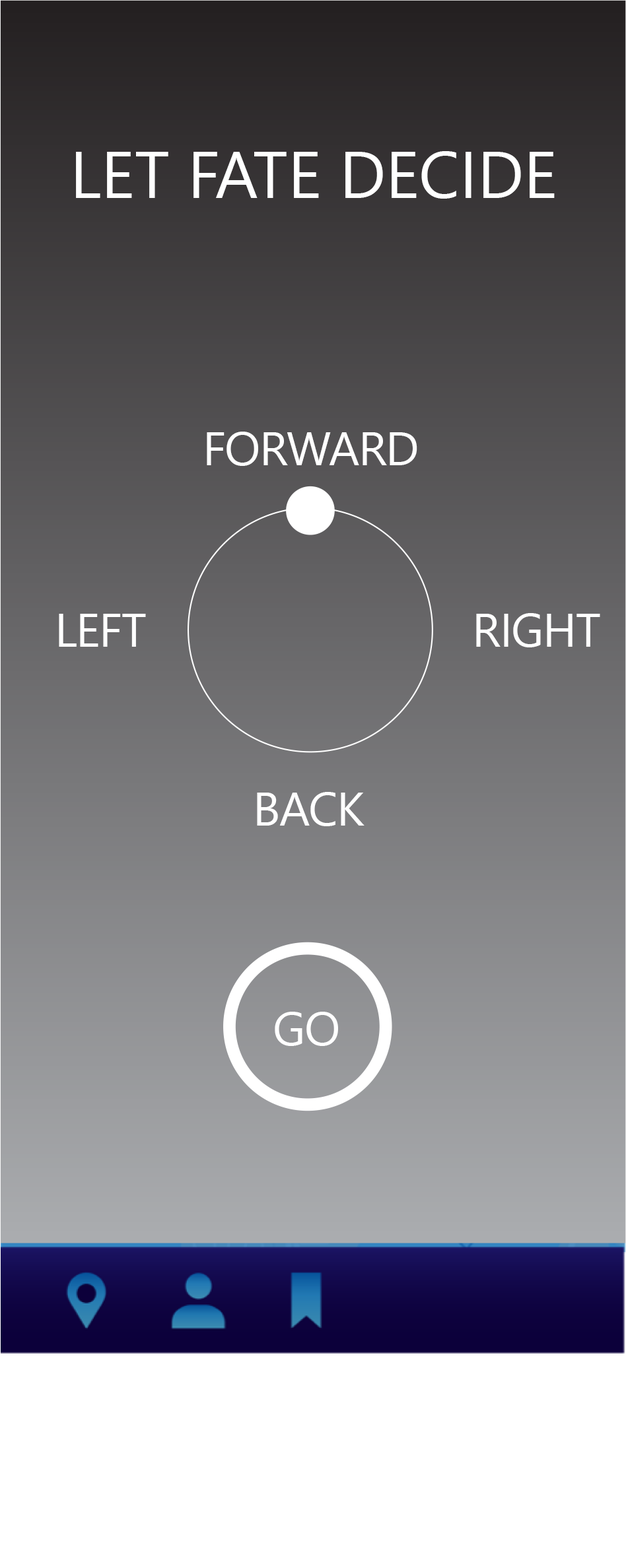
<style>
.page{position:relative;width:626px;height:1568px}
.page>*{position:absolute;margin:0}
.t1{font:66px "SegoeUIHistoric";color:#ffffff}
.t2{font:47.8px "SegoeUIHistoric";letter-spacing:-0.025em;color:#ffffff}
</style>
<div class="page">
<p class="t1" style="left:76px;top:151px;width:478px;height:48px">LET FATE DECIDE</p>
<p class="t2" style="left:207px;top:432px;width:210px;height:34px">FORWARD</p>
<p class="t2" style="left:59px;top:614px;width:87px;height:33px">LEFT</p>
<p class="t2" style="left:476px;top:613px;width:124px;height:34px">RIGHT</p>
<p class="t2" style="left:257px;top:792px;width:107px;height:34px">BACK</p>
<p class="t2" style="left:275px;top:1012px;width:63px;height:34px">GO</p>
</div>
